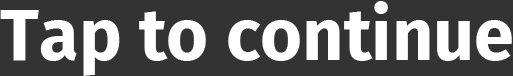
<style>
.page{position:relative;width:513px;height:76px;background:#333333}
.page>*{position:absolute;margin:0}
.t1{font:72px "FiraSans-Bold";color:#ffffff}
</style>
<div class="page">
<p class="t1" style="left:0px;top:1px;width:512px;height:75px">Tap to continue</p>
</div>
